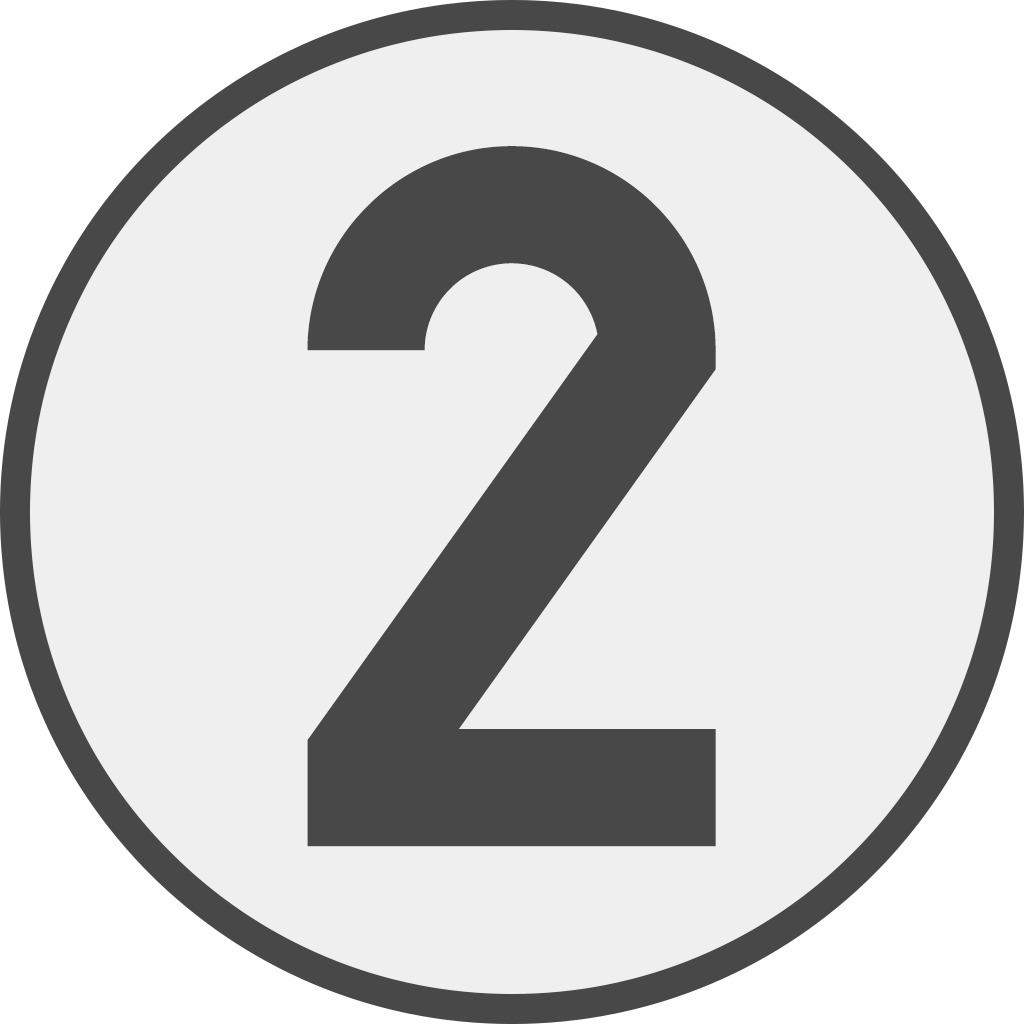
<style>
.page{position:relative;width:1024px;height:1024px;background:#efefef}
.page>*{position:absolute;margin:0}
.t1{font:1000px "Droidiga";color:#484848}
</style>
<div class="page">
<p class="t1" style="left:307px;top:146px;width:409px;height:701px">2</p>
</div>
